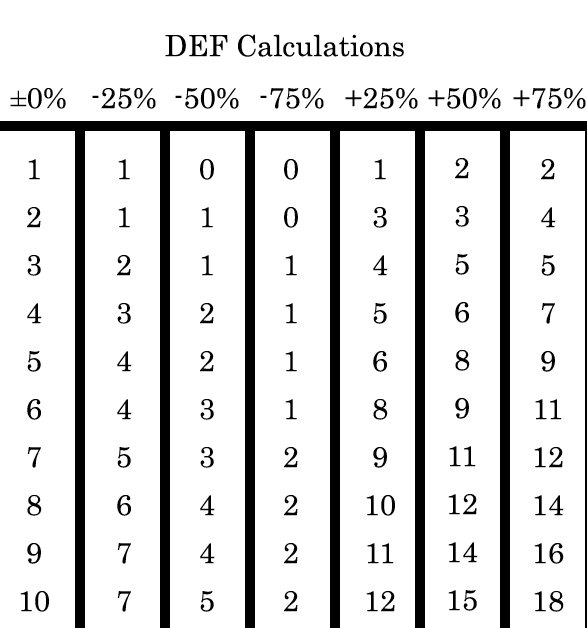
<style>
.page{position:relative;width:587px;height:628px;background:#ffffff}
.page>*{position:absolute;margin:0}
.t1{font:50px "Century";color:#000000}
.t2{font:50px/48px "Century";color:#000000}
.t3{font:50px/10px "Century";color:#000000}
</style>
<div class="page">
<p class="t1" style="left:165px;top:34px;width:239px;height:23px">DEF Calculations</p>
<p class="t1" style="left:10px;top:88px;width:56px;height:21px">±0%</p>
<p class="t1" style="left:92px;top:88px;width:64px;height:21px">-25%</p>
<p class="t1" style="left:175px;top:88px;width:64px;height:21px">-50%</p>
<p class="t1" style="left:260px;top:88px;width:64px;height:21px">-75%</p>
<p class="t1" style="left:345px;top:88px;width:73px;height:21px">+25%</p>
<p class="t1" style="left:428px;top:88px;width:73px;height:21px">+50%</p>
<p class="t1" style="left:513px;top:88px;width:73px;height:21px">+75%</p>
<p class="t2" style="left:20px;top:159px;width:29px;height:453px;text-align:center"><span class="t3">1<br></span>2<br>3<br>4<br>5<br>6<br>7<br>8<br>9<br>10</p>
<p class="t2" style="left:117px;top:159px;width:15px;height:453px;text-align:center"><span class="t3">1<br></span>1<br>2<br>3<br>4<br>4<br>5<br>6<br>7<br>7</p>
<p class="t2" style="left:200px;top:159px;width:15px;height:453px;text-align:center"><span class="t3">0<br></span>1<br>1<br>2<br>2<br>3<br>3<br>4<br>4<br>5</p>
<p class="t2" style="left:284px;top:159px;width:14px;height:453px;text-align:center"><span class="t3">0<br></span>0<br>1<br>1<br>1<br>1<br>2<br>2<br>2<br>2</p>
<p class="t2" style="left:366px;top:159px;width:29px;height:453px;text-align:center"><span class="t3">1<br></span>3<br>4<br>5<br>6<br>8<br>9<br>10<br>11<br>12</p>
<p class="t2" style="left:448px;top:158px;width:30px;height:453px;text-align:center"><span class="t3">2<br></span>3<br>5<br>6<br>8<br>9<br>11<br>12<br>14<br>15</p>
<p class="t2" style="left:534px;top:159px;width:30px;height:453px;text-align:center"><span class="t3">2<br></span>4<br>5<br>7<br>9<br>11<br>12<br>14<br>16<br>18</p>
</div>
